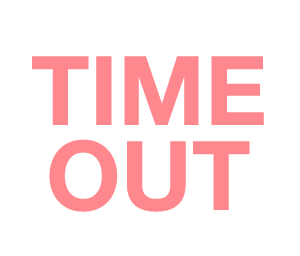
<style>
.page{position:relative;width:300px;height:256px;background:#ffffff}
.page>*{position:absolute;margin:0}
.t1{font:96px "HelveticaNeue-Bold";color:#ff888e}
</style>
<div class="page">
<p class="t1" style="left:32px;top:56px;width:232px;height:69px">TIME</p>
<p class="t1" style="left:49px;top:139px;width:201px;height:73px">OUT</p>
</div>
